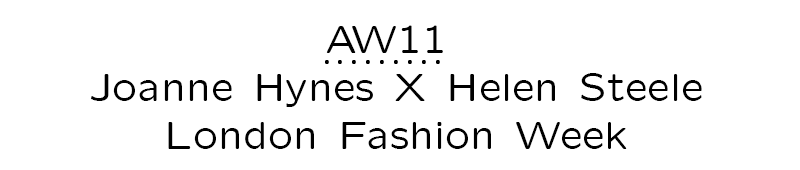
<style>
.page{position:relative;width:800px;height:170px;background:#ffffff}
.page>*{position:absolute;margin:0}
.t1{font:40px "Lcmss8";color:#000000}
</style>
<div class="page">
<p class="t1" style="left:91px;top:25px;width:611px;height:124px;text-align:center">AW11 <br>Joanne Hynes X Helen Steele<br>London Fashion Week</p>
<p class="t1" style="left:325px;top:60px;width:115px;height:4px">_________</p>
</div>
